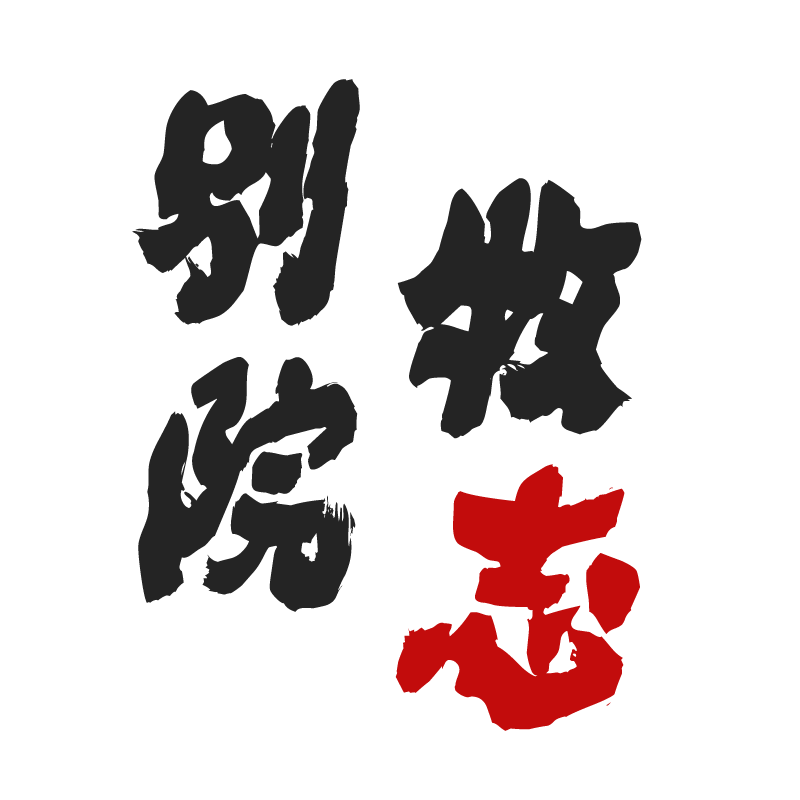
<style>
.page{position:relative;width:800px;height:800px;background:#ffffff}
.page>*{position:absolute;margin:0}
.t1{font:233px "Konshin";color:#242424;font-style:italic;scale:1.21 1}
.t2{font:241.6px "Konshin";color:#242424;font-style:italic;scale:1.23 1}
.t3{font:241.6px "Konshin";color:#c20c0c;font-style:italic;scale:1.23 1}
</style>
<div class="page">
<p class="t1" style="left:132px;top:79px;width:228px;height:533px;text-align:center">別院</p>
<p class="t2" style="left:395px;top:178px;width:247px;height:553px;text-align:center">牧<span class="t3">志</span></p>
</div>
